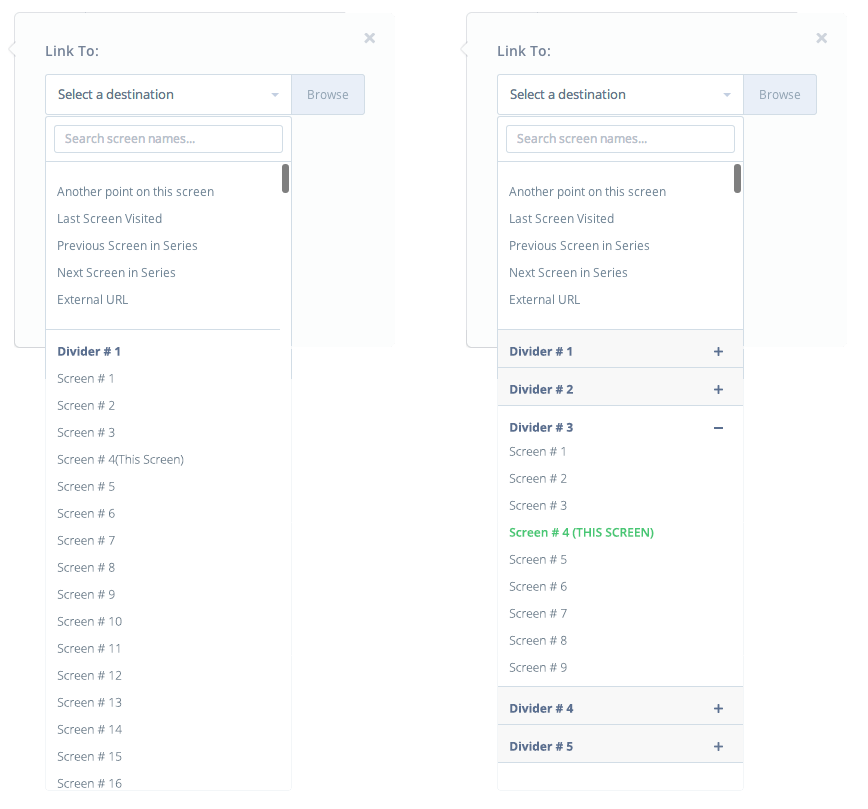
<style>
.page{position:relative;width:868px;height:809px;background:#ffffff}
.page>*{position:absolute;margin:0}
.t1{font:12px "OpenSans-Bold";color:#5a6f90}
.t2{font:12px "OpenSans-Light";color:#667988}
.t3{font:12px "OpenSans-Semibold";color:#47c774}
</style>
<div class="page">
<p class="t1" style="left:58px;top:346px;width:62px;height:10px">Divider # 1</p>
<p class="t1" style="left:510px;top:346px;width:62px;height:10px">Divider # 1</p>
<p class="t2" style="left:57px;top:373px;width:56px;height:10px">Screen # 1</p>
<p class="t1" style="left:510px;top:384px;width:63px;height:10px">Divider # 2</p>
<p class="t2" style="left:57px;top:400px;width:58px;height:10px">Screen # 2</p>
<p class="t1" style="left:510px;top:422px;width:63px;height:10px">Divider # 3</p>
<p class="t2" style="left:57px;top:427px;width:58px;height:10px">Screen # 3</p>
<p class="t2" style="left:509px;top:446px;width:56px;height:10px">Screen # 1</p>
<p class="t2" style="left:57px;top:454px;width:127px;height:12px">Screen # 4(This Screen)</p>
<p class="t2" style="left:509px;top:473px;width:58px;height:10px">Screen # 2</p>
<p class="t2" style="left:57px;top:481px;width:58px;height:10px">Screen # 5</p>
<p class="t2" style="left:57px;top:508px;width:58px;height:10px">Screen # 6</p>
<p class="t2" style="left:509px;top:500px;width:58px;height:10px">Screen # 3</p>
<p class="t3" style="left:509px;top:527px;width:145px;height:12px">Screen # 4 (THIS SCREEN)</p>
<p class="t2" style="left:57px;top:535px;width:58px;height:10px">Screen # 7</p>
<p class="t2" style="left:509px;top:554px;width:58px;height:10px">Screen # 5</p>
<p class="t2" style="left:57px;top:562px;width:58px;height:10px">Screen # 8</p>
<p class="t2" style="left:509px;top:581px;width:58px;height:10px">Screen # 6</p>
<p class="t2" style="left:57px;top:589px;width:58px;height:10px">Screen # 9</p>
<p class="t2" style="left:57px;top:616px;width:65px;height:10px">Screen # 10</p>
<p class="t2" style="left:509px;top:608px;width:58px;height:10px">Screen # 7</p>
<p class="t2" style="left:509px;top:635px;width:58px;height:10px">Screen # 8</p>
<p class="t2" style="left:57px;top:643px;width:63px;height:10px">Screen # 11</p>
<p class="t2" style="left:509px;top:662px;width:58px;height:10px">Screen # 9</p>
<p class="t2" style="left:57px;top:670px;width:65px;height:10px">Screen # 12</p>
<p class="t2" style="left:57px;top:697px;width:65px;height:10px">Screen # 13</p>
<p class="t1" style="left:510px;top:703px;width:64px;height:10px">Divider # 4</p>
<p class="t2" style="left:57px;top:724px;width:65px;height:10px">Screen # 14</p>
<p class="t1" style="left:510px;top:741px;width:63px;height:10px">Divider # 5</p>
<p class="t2" style="left:57px;top:751px;width:65px;height:10px">Screen # 15</p>
<p class="t2" style="left:57px;top:778px;width:65px;height:10px">Screen # 16</p>
</div>
